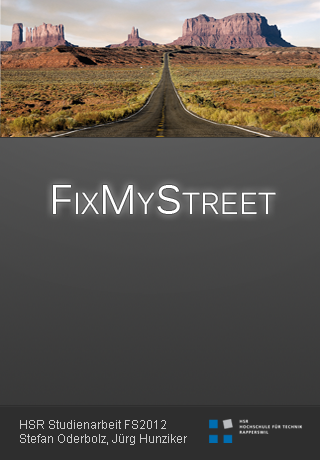
<style>
.page{position:relative;width:320px;height:460px}
.page>*{position:absolute;margin:0}
.t1{font:30px "Kalinga";color:#ffffff}
.t2{font:41px "Kalinga";color:#ffffff}
.t3{font:12px "ArialMT";color:#cacaca}
</style>
<div class="page">
<p class="t1" style="left:53px;top:185px;width:223px;height:30px"><span class="t2">F</span>IX<span class="t2">M</span>Y<span class="t2">S</span>TREET</p>
<p class="t3" style="left:20px;top:420px;width:167px;height:25px">HSR Studienarbeit FS2012<br>Stefan Oderbolz, Jürg Hunziker</p>
</div>
